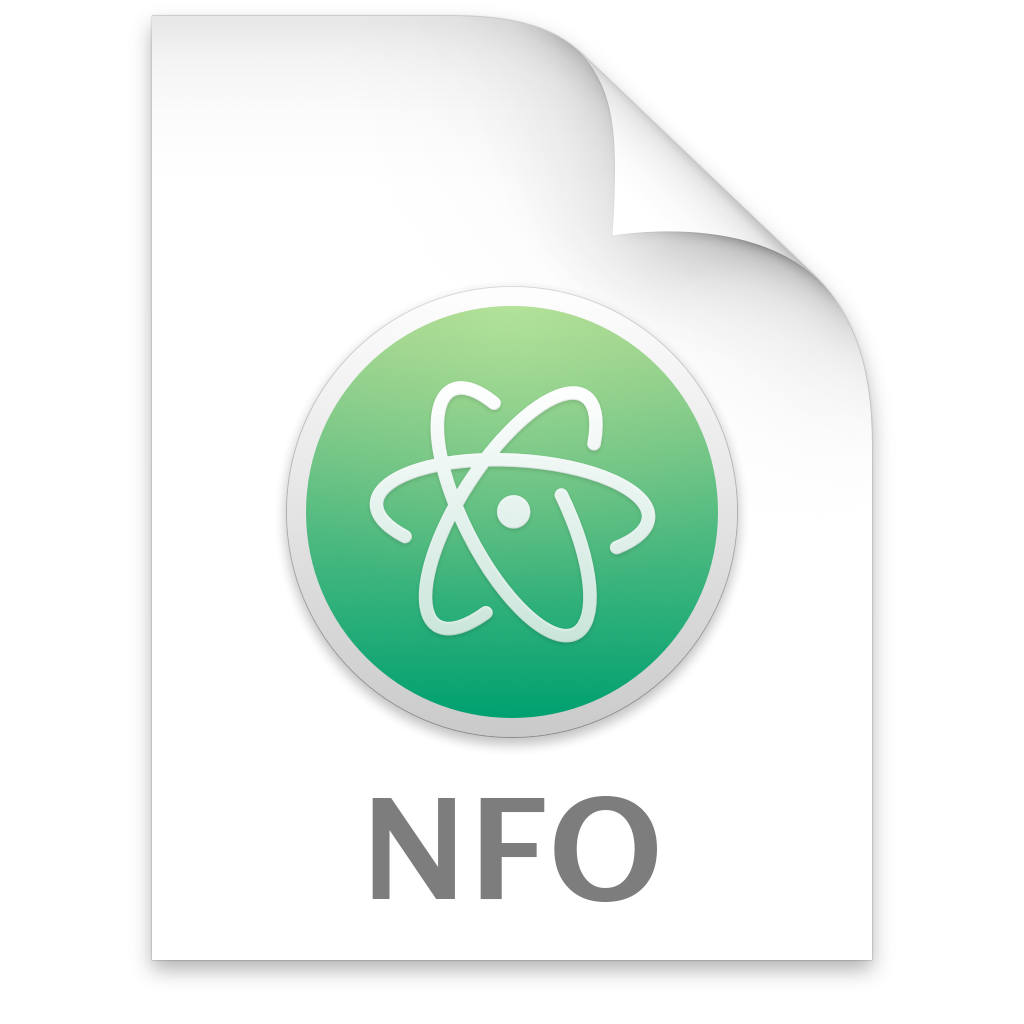
<style>
.page{position:relative;width:1024px;height:1024px;background:#ffffff}
.page>*{position:absolute;margin:0}
.t1{font:140px "LucidaGrande-Bold";color:#7d7d7d}
</style>
<div class="page">
<p class="t1" style="left:372px;top:796px;width:285px;height:106px">NFO</p>
</div>
